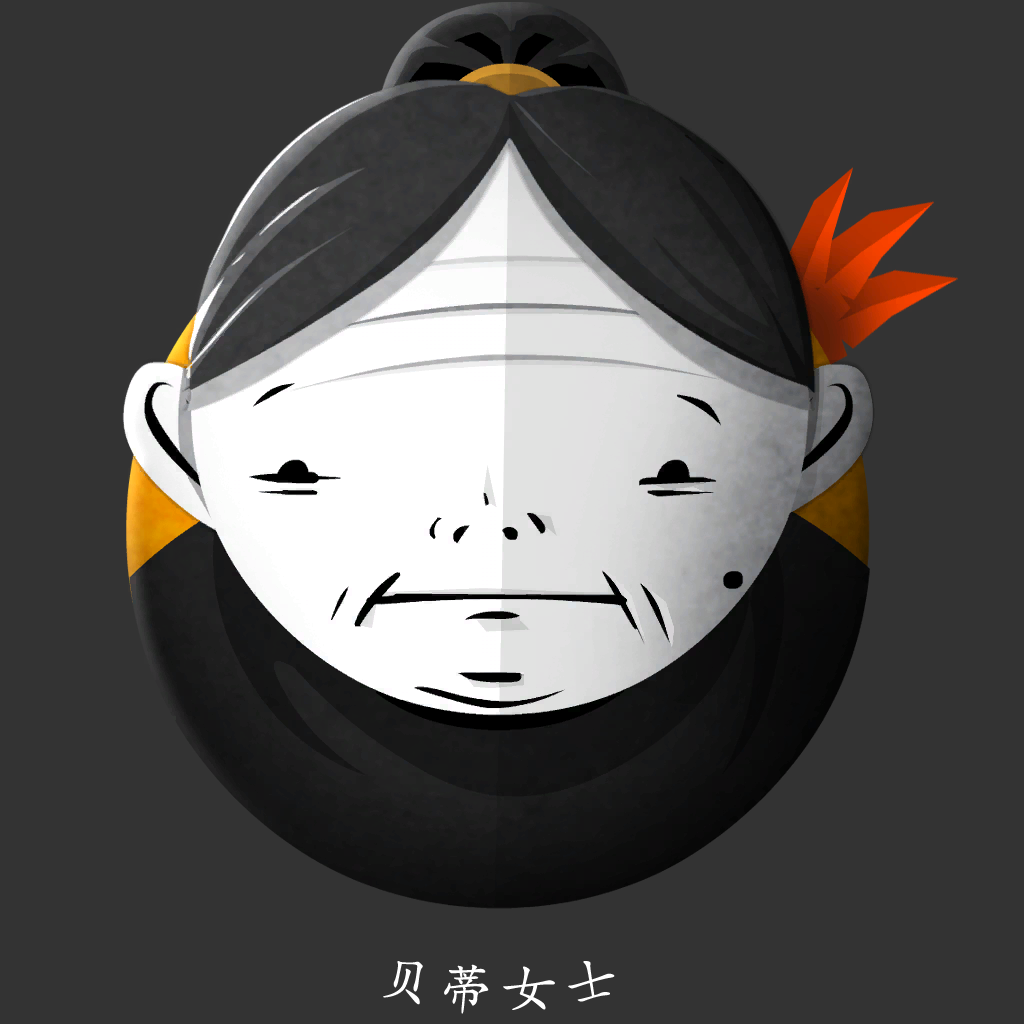
<style>
.page{position:relative;width:1024px;height:1024px;background:#333333}
.page>*{position:absolute;margin:0}
.t1{font:53.3px "STKaiti";letter-spacing:0.1em;color:#ffffff}
</style>
<div class="page">
<p class="t1" style="left:383px;top:961px;width:232px;height:53px">贝蒂女士</p>
</div>
